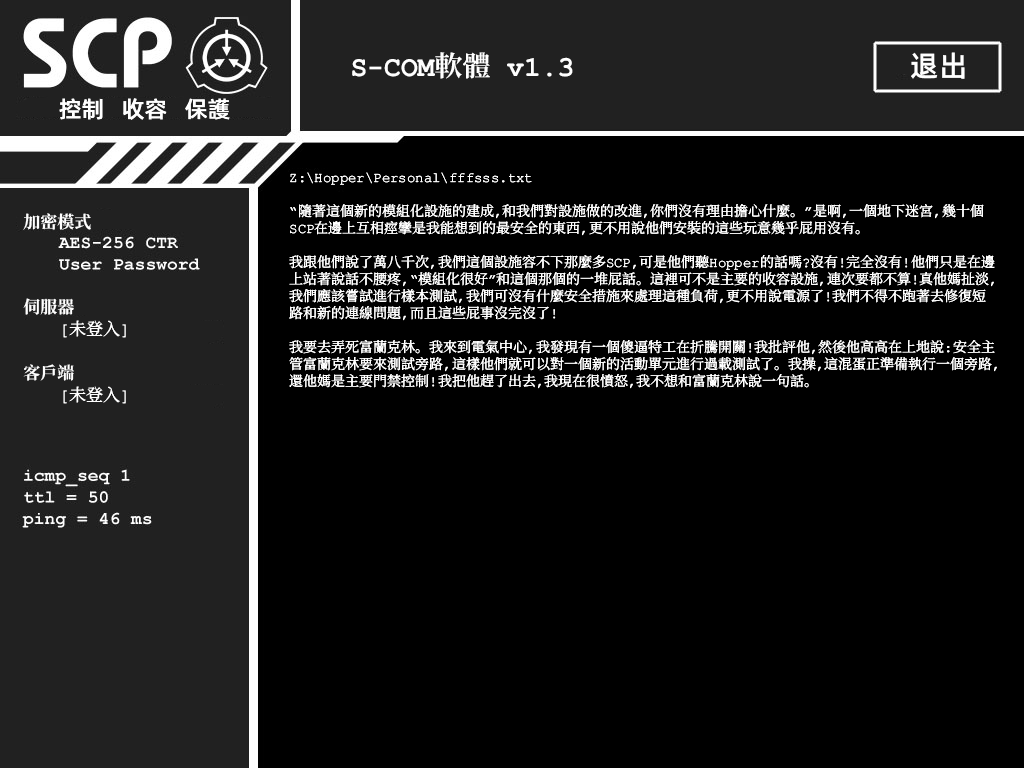
<style>
.page{position:relative;width:1024px;height:768px;background:#000000}
.page>*{position:absolute;margin:0}
.t1{font:28px "ContainmentBreach-Bold";color:#ffffff}
.t2{font:29px "AlibabaPuHuiTiM";color:#ffffff}
.t3{font:23px "AlibabaPuHuiTiM";color:#ffffff}
.t4{font:14px/17px "ContainmentBreach-Regular";color:#ffffff}
.t5{font:17px/18px "ContainmentBreach-Regular";color:#ffffff}
.t6{font:17px/17px "ContainmentBreach-Bold";color:#ffffff}
.t7{font:17px/22px "ContainmentBreach-Bold";color:#ffffff}
.t8{font:17px/22px "ContainmentBreach-Regular";color:#ffffff}
</style>
<div class="page">
<p class="t1" style="left:352px;top:52px;width:221px;height:27px">S-COM軟體 v1.3</p>
<p class="t2" style="left:911px;top:52px;width:54px;height:27px">退出</p>
<p class="t3" style="left:59px;top:98px;width:171px;height:22px">控制   收容   保護</p>
<p class="t4" style="left:289px;top:172px;width:708px;height:217px">Z:\Hopper\Personal\ｆffsss.txt<br><br>“隨著這個新的模組化設施的建成，和我們對設施做的改進，你們沒有理由擔心什麼。”是啊，一個地下迷宮，幾十個<br>SCP在邊上互相痙攣是我能想到的最安全的東西，更不用說他們安裝的這些玩意幾乎屁用沒有。<br><br>我跟他們說了萬八千次，我們這個設施容不下那麼多SCP，可是他們聽Hopper的話嗎？沒有！完全沒有！他們只是在邊<br>上站著說話不腰疼，“模組化很好”和這個那個的一堆屁話。這裡可不是主要的收容設施，連次要都不算！真他媽扯淡，<br>我們應該嘗試進行樣本測試，我們可沒有什麼安全措施來處理這種負荷，更不用說電源了！我們不得不跑著去修復短<br>路和新的連線問題，而且這些屁事沒完沒了！<br><br>我要去弄死富蘭克林。我來到電氣中心，我發現有一個傻逼特工在折騰開關！我批評他，然後他高高在上地說：安全主<br>管富蘭克林要來測試旁路，這樣他們就可以對一個新的活動單元進行過載測試了。我操，這混蛋正準備執行一個旁路，<br>還他媽是主要門禁控制！我把他趕了出去，我現在很憤怒，我不想和富蘭克林說一句話。</p>
<p class="t5" style="left:23px;top:213px;width:103px;height:191px"><span class="t6">加密模式<br><br><br><br><br></span><span class="t7">伺服器<br> </span>[未登入]<br><br><span class="t7">客戶端<br> </span><span class="t8">[未登入]</span></p>
</div>
